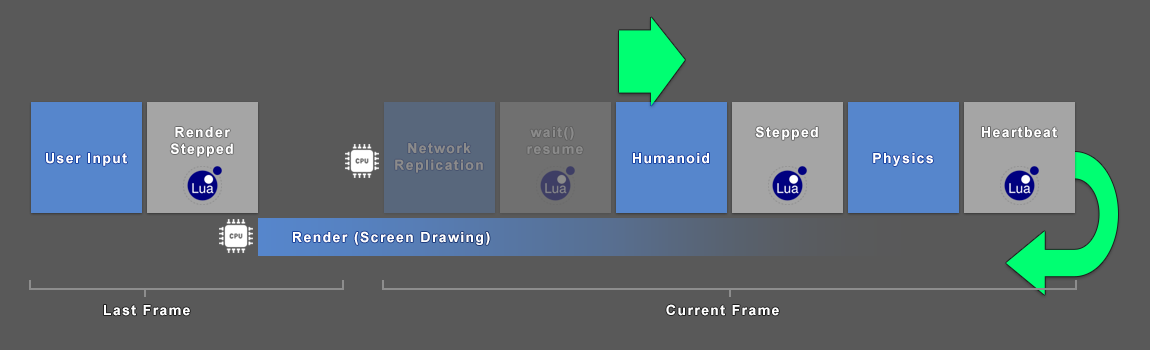
<style>
.page{position:relative;width:1150px;height:350px;background:#595959}
.page>*{position:absolute;margin:0}
.t1{font:14px "Arial-BoldMT";letter-spacing:0.1em;color:#ffffff}
.t2{font:14px "Arial-BoldMT";letter-spacing:0.1em;color:#8b8b8b}
</style>
<div class="page">
<p class="t1" style="left:755px;top:126px;width:63px;height:14px">Stepped</p>
<p class="t1" style="left:170px;top:127px;width:63px;height:30px;text-align:center">Render<br>Stepped</p>
<p class="t2" style="left:527px;top:127px;width:56px;height:27px;text-align:center">wait() <br>resume</p>
<p class="t1" style="left:982px;top:127px;width:75px;height:11px">Heartbeat</p>
<p class="t2" style="left:395px;top:143px;width:88px;height:30px;text-align:center">Network<br>Replication</p>
<p class="t1" style="left:46px;top:153px;width:81px;height:13px">User Input</p>
<p class="t1" style="left:633px;top:153px;width:76px;height:11px">Humanoid</p>
<p class="t1" style="left:873px;top:153px;width:60px;height:13px">Physics</p>
<p class="t1" style="left:293px;top:231px;width:197px;height:14px">Render (Screen Drawing)</p>
<p class="t1" style="left:104px;top:305px;width:86px;height:11px">Last Frame</p>
<p class="t1" style="left:666px;top:304px;width:113px;height:12px">Current Frame</p>
</div>
